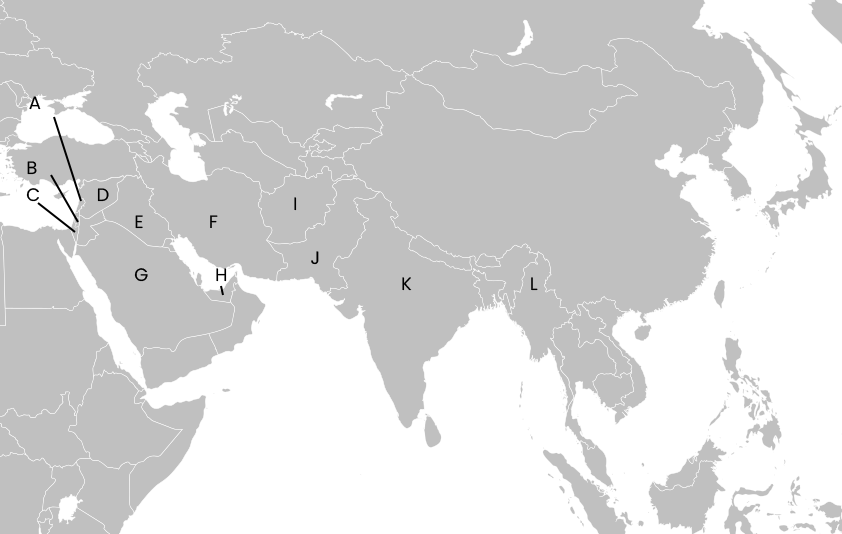
<style>
.page{position:relative;width:842px;height:534px;background:#c0c0c0}
.page>*{position:absolute;margin:0}
.t1{font:18px "Poppins-Regular";letter-spacing:0.22em;color:#000000}
.t2{font:18px/26.8px "Poppins-Regular";letter-spacing:0.22em;color:#000000}
</style>
<div class="page">
<p class="t1" style="left:29px;top:96px;width:12px;height:14px">A</p>
<p class="t2" style="left:26px;top:161px;width:201px;height:121px">B<br>C      D<br>   E       F<br>        <br>   G   H</p>
<p class="t2" style="left:294px;top:197px;width:244px;height:94px">I<br><br>  J       <br>   K             L</p>
</div>
